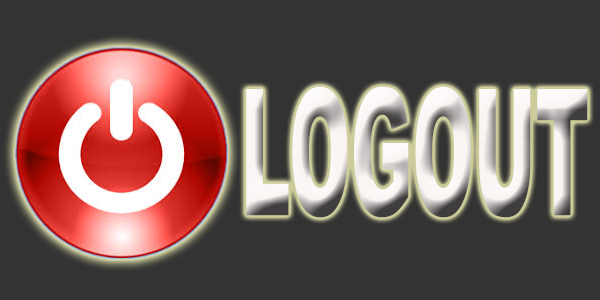
<style>
.page{position:relative;width:600px;height:300px;background:#333333}
.page>*{position:absolute;margin:0}
.t1{font:176px "Arial-Black";scale:0.42 1}
</style>
<div class="page">
<p class="t1" style="left:246px;top:86px;width:342px;height:132px">LOGOUT</p>
</div>
